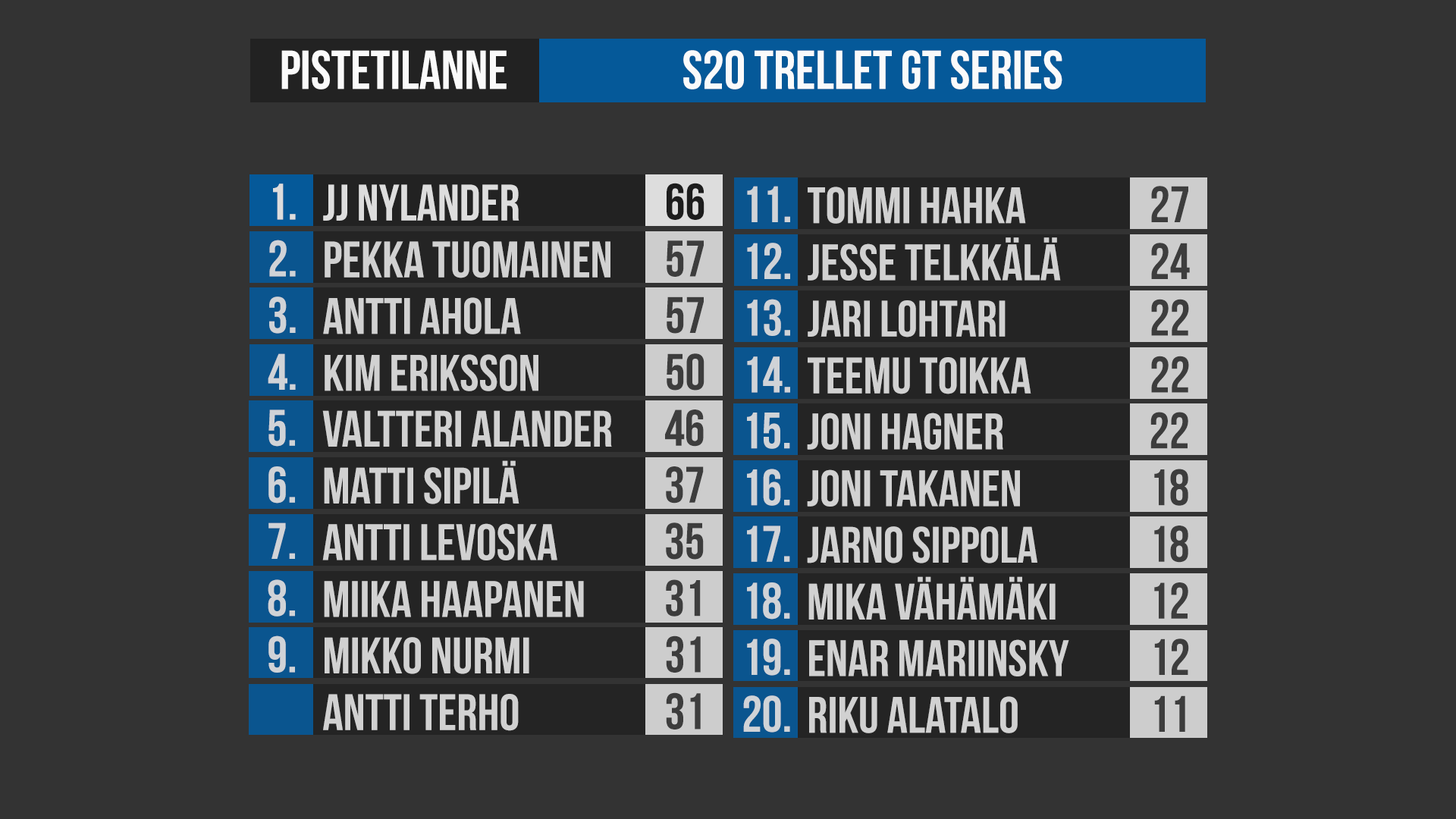
<style>
.page{position:relative;width:1456px;height:819px;background:#333333}
.page>*{position:absolute;margin:0}
.t1{font:54.6px "BebasNeue";color:#fafafa}
.t2{font:51.3px "BebasNeue";color:#f0f0f0}
.t3{font:51.3px "BebasNeue";color:#1b1b1b}
.t4{font:51.3px "BebasNeue";color:#d0d3d7}
.t5{font:51.3px "BebasNeue";color:#3d3d3d}
.t6{font:51.3px "BebasNeue";color:#d1d1d1}
.t7{font:51.2px "BebasNeue";color:#d0d3d7}
.t8{font:51.2px "BebasNeue";color:#d1d1d1}
.t9{font:51.2px "BebasNeue";color:#3d3d3d}
</style>
<div class="page">
<p class="t1" style="left:281px;top:50px;width:226px;height:39px">pistetilanne</p>
<p class="t1" style="left:683px;top:50px;width:379px;height:39px">S20 trellet Gt Series</p>
<p class="t2" style="left:273px;top:184px;width:23px;height:36px">1.</p>
<p class="t2" style="left:323px;top:184px;width:196px;height:37px">jj nylander</p>
<p class="t3" style="left:667px;top:183px;width:37px;height:37px">66</p>
<p class="t4" style="left:747px;top:186px;width:43px;height:36px">11.</p>
<p class="t5" style="left:1151px;top:186px;width:37px;height:36px">27</p>
<p class="t6" style="left:808px;top:187px;width:218px;height:37px">tommi hahka</p>
<p class="t4" style="left:269px;top:240px;width:27px;height:37px">2.</p>
<p class="t6" style="left:325px;top:241px;width:285px;height:37px">pekka tuomainen</p>
<p class="t5" style="left:667px;top:240px;width:37px;height:37px">57</p>
<p class="t4" style="left:747px;top:243px;width:43px;height:36px">12.</p>
<p class="t6" style="left:808px;top:237px;width:253px;height:44px">jesse telkkälä</p>
<p class="t5" style="left:1151px;top:243px;width:39px;height:36px">24</p>
<p class="t4" style="left:269px;top:297px;width:27px;height:37px">3.</p>
<p class="t6" style="left:323px;top:297px;width:198px;height:37px">antti ahola</p>
<p class="t5" style="left:667px;top:297px;width:37px;height:37px">57</p>
<p class="t4" style="left:747px;top:299px;width:43px;height:37px">13.</p>
<p class="t6" style="left:808px;top:300px;width:198px;height:37px">jari lohtari</p>
<p class="t5" style="left:1151px;top:299px;width:38px;height:37px">22</p>
<p class="t4" style="left:268px;top:353px;width:28px;height:37px">4.</p>
<p class="t5" style="left:667px;top:353px;width:37px;height:38px">50</p>
<p class="t6" style="left:325px;top:354px;width:213px;height:37px">kim eriksson</p>
<p class="t4" style="left:747px;top:356px;width:43px;height:37px">14.</p>
<p class="t6" style="left:808px;top:357px;width:223px;height:37px">teemu toikka</p>
<p class="t5" style="left:1151px;top:356px;width:38px;height:37px">22</p>
<p class="t4" style="left:268px;top:409px;width:27px;height:38px">5.</p>
<p class="t6" style="left:322px;top:410px;width:290px;height:37px">valtteri alander</p>
<p class="t5" style="left:665px;top:409px;width:39px;height:38px">46</p>
<p class="t4" style="left:747px;top:413px;width:43px;height:36px">15.</p>
<p class="t6" style="left:807px;top:413px;width:196px;height:37px">joni hagner</p>
<p class="t5" style="left:1150px;top:412px;width:38px;height:37px">22</p>
<p class="t6" style="left:324px;top:460px;width:195px;height:44px">matti sipilä</p>
<p class="t4" style="left:268px;top:466px;width:27px;height:38px">6.</p>
<p class="t5" style="left:666px;top:466px;width:38px;height:38px">37</p>
<p class="t4" style="left:747px;top:469px;width:43px;height:37px">16.</p>
<p class="t6" style="left:807px;top:469px;width:213px;height:38px">joni takanen</p>
<p class="t5" style="left:1154px;top:469px;width:34px;height:37px">18</p>
<p class="t4" style="left:268px;top:522px;width:27px;height:37px">7.</p>
<p class="t6" style="left:322px;top:523px;width:235px;height:37px">antti levoska</p>
<p class="t5" style="left:666px;top:522px;width:38px;height:38px">35</p>
<p class="t4" style="left:747px;top:526px;width:43px;height:36px">17.</p>
<p class="t6" style="left:807px;top:526px;width:230px;height:37px">jarno sippola</p>
<p class="t5" style="left:1154px;top:526px;width:34px;height:37px">18</p>
<p class="t4" style="left:268px;top:579px;width:27px;height:38px">8.</p>
<p class="t6" style="left:324px;top:581px;width:260px;height:36px">miika haapanen</p>
<p class="t5" style="left:666px;top:579px;width:35px;height:38px">31</p>
<p class="t6" style="left:808px;top:576px;width:248px;height:44px">mika vähämäki</p>
<p class="t4" style="left:747px;top:582px;width:43px;height:38px">18.</p>
<p class="t5" style="left:1154px;top:582px;width:34px;height:37px">12</p>
<p class="t7" style="left:268px;top:635px;width:27px;height:38px">9.</p>
<p class="t8" style="left:325px;top:637px;width:204px;height:37px">mikko nurmi</p>
<p class="t9" style="left:666px;top:635px;width:35px;height:38px">31</p>
<p class="t7" style="left:747px;top:639px;width:43px;height:37px">19.</p>
<p class="t8" style="left:809px;top:639px;width:260px;height:37px">enar mariinsky</p>
<p class="t9" style="left:1154px;top:639px;width:35px;height:36px">12</p>
<p class="t8" style="left:323px;top:694px;width:196px;height:37px">antti terho</p>
<p class="t9" style="left:666px;top:692px;width:35px;height:38px">31</p>
<p class="t7" style="left:743px;top:695px;width:47px;height:38px">20.</p>
<p class="t8" style="left:809px;top:696px;width:209px;height:37px">riku alatalo</p>
<p class="t9" style="left:1154px;top:695px;width:31px;height:37px">11</p>
</div>
